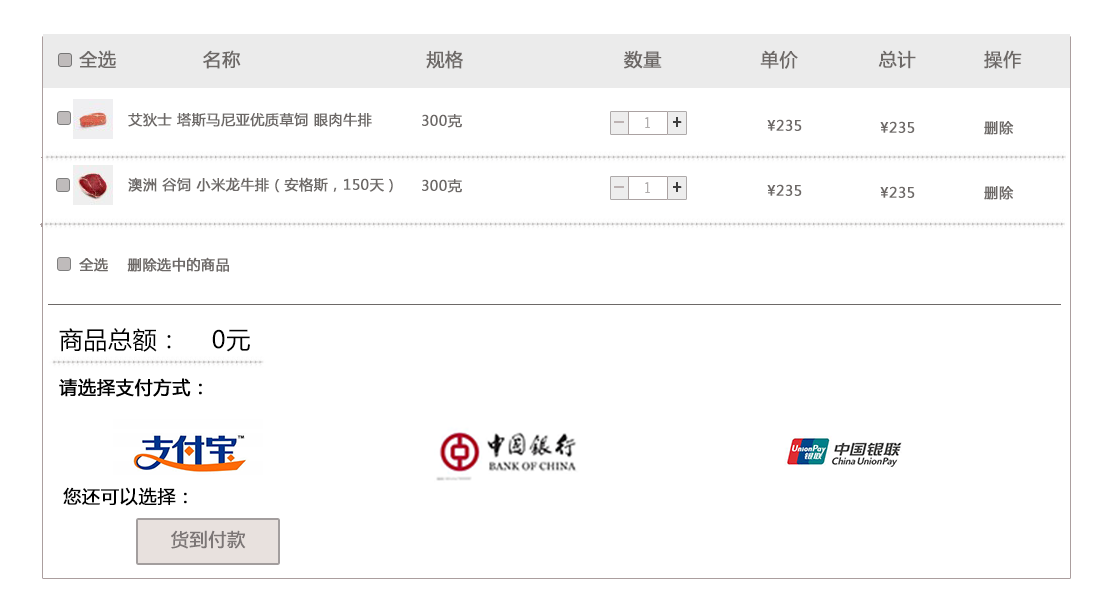
<style>
.page{position:relative;width:1100px;height:600px;background:#ffffff}
.page>*{position:absolute;margin:0}
.t1{font:18px "MicrosoftYaHei";letter-spacing:0.02em;color:#6d6967;font-weight:bold}
.t2{font:14px "MicrosoftYaHei";letter-spacing:0.02em;color:#6d6967;font-weight:bold}
.t3{font:14.6px "MicrosoftYaHei";letter-spacing:0.01em;color:#b0adad;scale:0.72 1}
.t4{font:24px "MicrosoftYaHei";letter-spacing:0.02em;color:#000000}
.t5{font:18px "MicrosoftYaHei";letter-spacing:0.02em;color:#000000;font-weight:bold}
.t6{font:18px "MicrosoftYaHei";letter-spacing:0.02em;color:#7c7676;font-weight:bold}
</style>
<div class="page">
<p class="t1" style="left:79px;top:50px;width:943px;height:19px">全选              名称                              规格                          数量                单价             总计           操作</p>
<p class="t2" style="left:128px;top:112px;width:244px;height:15px">艾狄士 塔斯马尼亚优质草饲 眼肉牛排</p>
<p class="t2" style="left:422px;top:114px;width:40px;height:14px">300克</p>
<p class="t3" style="left:645px;top:117px;width:5px;height:11px">1</p>
<p class="t2" style="left:767px;top:119px;width:35px;height:12px">¥235</p>
<p class="t2" style="left:880px;top:121px;width:35px;height:12px">¥235</p>
<p class="t2" style="left:984px;top:121px;width:30px;height:14px">删除</p>
<p class="t2" style="left:128px;top:177px;width:265px;height:16px">澳洲 谷饲 小米龙牛排（安格斯，150天）</p>
<p class="t2" style="left:422px;top:179px;width:40px;height:14px">300克</p>
<p class="t3" style="left:645px;top:182px;width:5px;height:11px">1</p>
<p class="t2" style="left:767px;top:184px;width:35px;height:12px">¥235</p>
<p class="t2" style="left:880px;top:186px;width:35px;height:12px">¥235</p>
<p class="t2" style="left:984px;top:186px;width:30px;height:14px">删除</p>
<p class="t4" style="left:59px;top:328px;width:191px;height:24px">商品总额：    0元</p>
<p class="t5" style="left:63px;top:487px;width:124px;height:19px">您还可以选择：</p>
<p class="t6" style="left:171px;top:530px;width:75px;height:19px">货到付款</p>
</div>
